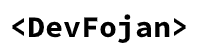
<style>
.page{position:relative;width:200px;height:50px;background:#ffffff}
.page>*{position:absolute;margin:0}
.t1{font:30px "SourceCodePro-Bold";color:#000000}
</style>
<div class="page">
<p class="t1" style="left:12px;top:14px;width:174px;height:29px">&lt;DevFojan&gt;</p>
</div>
